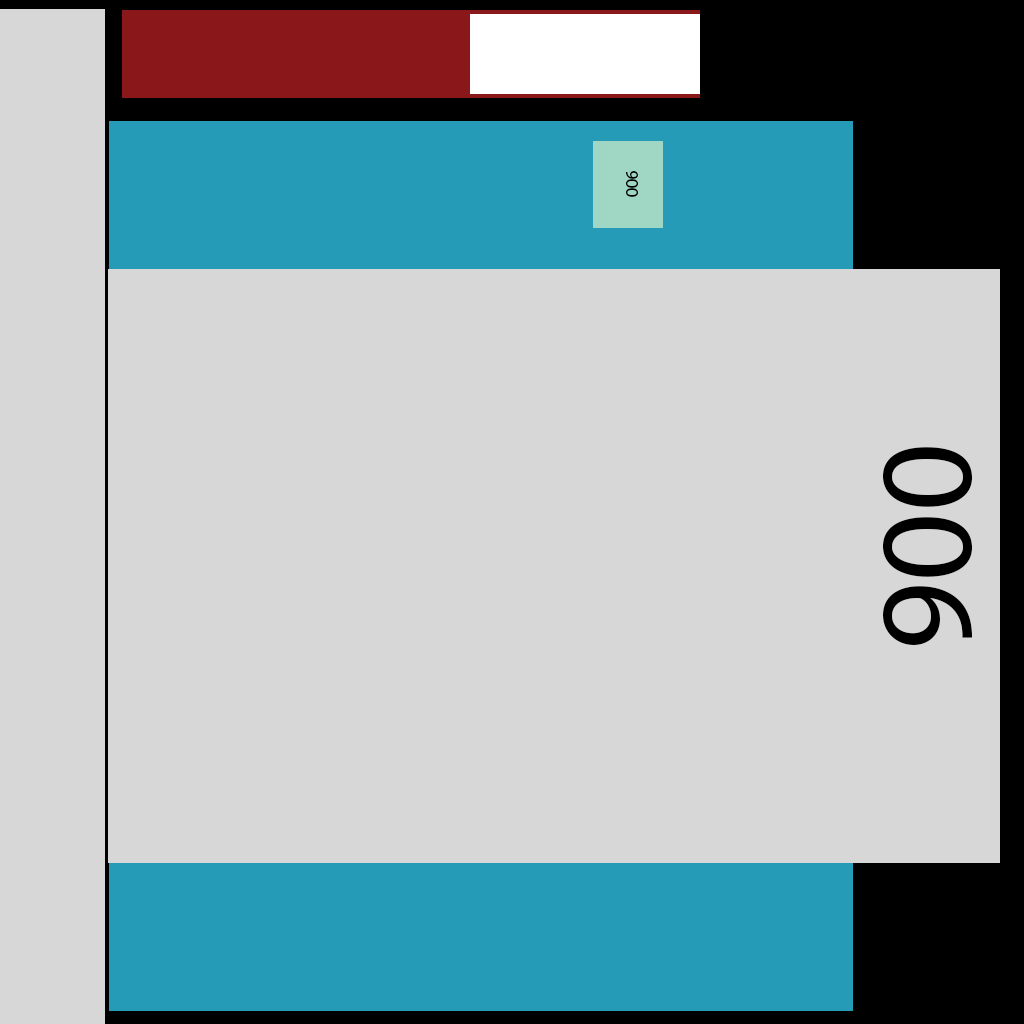
<style>
.page{position:relative;width:1024px;height:1024px;background:#d7d7d7}
.page>*{position:absolute;margin:0}
.t1{font:18px "MyriadPro-Regular";color:#000000}
.t2{font:134.3px "MyriadPro-Regular";color:#000000}
</style>
<div class="page">
<p class="t1" style="left:626px;top:171px;width:12px;height:26px;rotate:90deg">900</p>
<p class="t2" style="left:883px;top:447px;width:89px;height:198px;rotate:-90deg">900</p>
</div>
